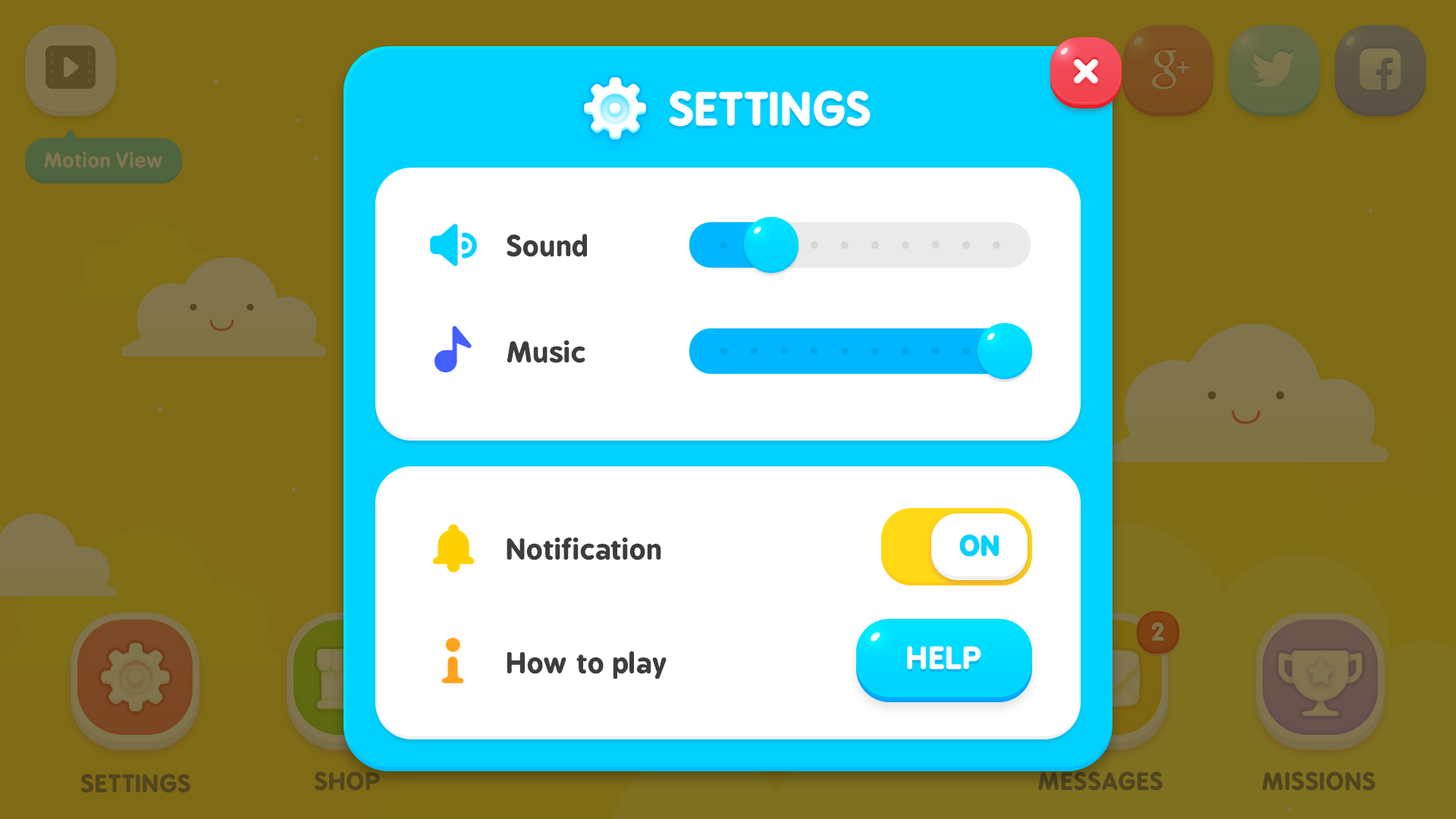
<style>
.page{position:relative;width:1456px;height:819px;background:#7f6a15}
.page>*{position:absolute;margin:0}
.t1{font:43.1px "BPreplay-Bold";color:#ffffff;text-transform:uppercase;scale:1.05 1}
.t2{font:27.4px/106.2px "BPreplay-Bold";color:#3d3d3d;scale:1.06 1}
.t3{font:27.4px/113.7px "BPreplay-Bold";color:#3d3d3d;scale:1.06 1}
.t4{font:25.9px "BPreplay-Bold";color:#00d2ff;font-weight:bold;scale:1.05 1}
.t5{font:28.8px "BPreplay-Bold";color:#ffffff;text-transform:uppercase;font-weight:bold;scale:1.05 1}
</style>
<div class="page">
<p class="t1" style="left:670px;top:90px;width:201px;height:37px">Settings</p>
<p class="t2" style="left:507px;top:234px;width:80px;height:129px">Sound<br>Music</p>
<p class="t3" style="left:507px;top:537px;width:160px;height:142px">Notification<br>How to play</p>
<p class="t4" style="left:959px;top:535px;width:40px;height:22px">ON</p>
<p class="t5" style="left:907px;top:646px;width:74px;height:24px">HELP</p>
</div>
